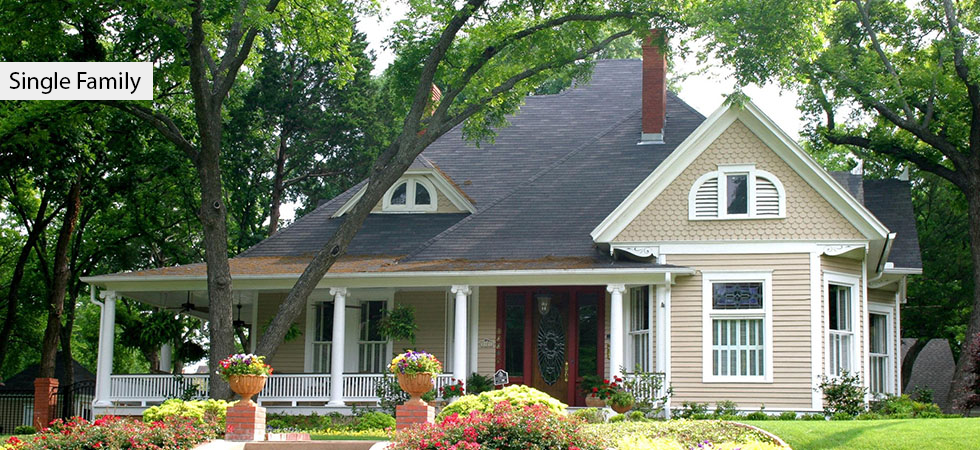
<style>
.page{position:relative;width:980px;height:450px}
.page>*{position:absolute;margin:0}
.t1{font:24px "MyriadPro-Regular";color:#000000}
</style>
<div class="page">
<p class="t1" style="left:9px;top:72px;width:132px;height:22px">Single Family</p>
</div>
